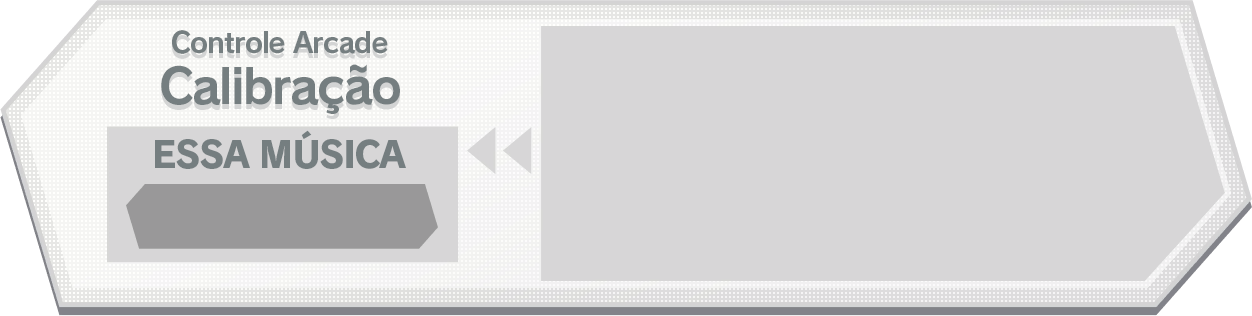
<style>
.page{position:relative;width:1252px;height:316px;background:#d7d6d7}
.page>*{position:absolute;margin:0}
.t1{font:28px "RodinPro-B";letter-spacing:-0.04em;color:#757e80}
.t2{font:48px "RodinPro-B";letter-spacing:-0.04em;color:#757e80}
.t3{font:36px "RodinPro-EB";letter-spacing:-0.051em;color:#757e80}
</style>
<div class="page">
<p class="t1" style="left:172px;top:30px;width:216px;height:24px">Controle Arcade</p>
<p class="t2" style="left:161px;top:64px;width:239px;height:50px">Calibração</p>
<p class="t3" style="left:155px;top:130px;width:251px;height:39px">ESSA MÚSICA</p>
</div>
